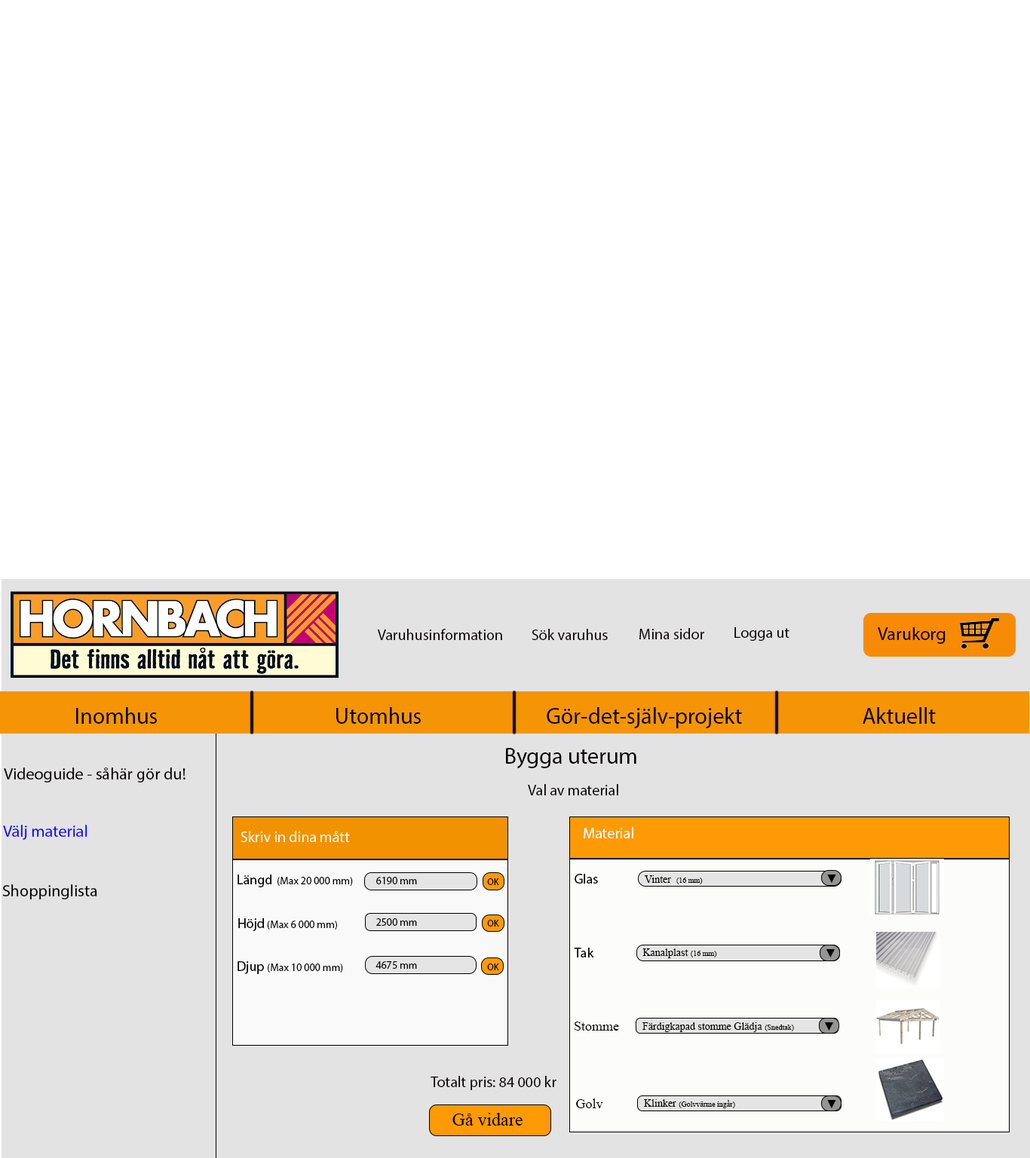
<style>
.page{position:relative;width:1030px;height:1158px;background:#ffffff}
.page>*{position:absolute;margin:0}
.t1{font:15.1px "MyriadPro-Regular";color:#060000}
.t2{font:18.1px "MyriadPro-Regular";color:#060000}
.t3{font:22.6px "MyriadPro-Regular";color:#0b0700}
.t4{font:22.6px "MyriadPro-Regular";color:#060000}
.t5{font:16.6px "MyriadPro-Regular";color:#060000}
.t6{font:16.6px "MyriadPro-Regular";color:#0f04f8}
.t7{font:15.1px "MyriadPro-Regular";color:#faf9f9}
.t8{font:15.1px "MyriadPro-Regular";color:#fcfcfb}
.t9{font:10.6px "MyriadPro-Regular";color:#020100}
.t10{font:13.6px "MyriadPro-Regular";color:#020100}
.t11{font:10.6px "MyriadPro-Regular";color:#040200}
.t12{font:9px "MyriadPro-Regular";color:#040200}
.t13{font:13.6px "MyriadPro-Regular";color:#040200}
.t14{font:7.5px "TimesNewRomanPSMT";color:#020100}
.t15{font:10.6px "TimesNewRomanPSMT";color:#020100}
.t16{font:12.1px "TimesNewRomanPSMT";color:#040200}
.t17{font:16.6px "MyriadPro-Regular";color:#000004}
.t18{font:13.6px "TimesNewRomanPSMT";color:#040200}
.t19{font:12.1px "TimesNewRomanPSMT";color:#020100}
.t20{font:18.1px "TimesNewRomanPSMT";color:#040200}
</style>
<div class="page">
<p class="t1" style="left:377px;top:629px;width:125px;height:11px">Varuhusinformation</p>
<p class="t1" style="left:531px;top:629px;width:77px;height:11px">Sök varuhus</p>
<p class="t1" style="left:639px;top:628px;width:65px;height:11px">Mina sidor</p>
<p class="t1" style="left:734px;top:627px;width:55px;height:14px">Logga ut</p>
<p class="t2" style="left:878px;top:627px;width:67px;height:17px">Varukorg</p>
<p class="t3" style="left:76px;top:707px;width:81px;height:17px">Inomhus</p>
<p class="t3" style="left:336px;top:707px;width:85px;height:17px">Utomhus</p>
<p class="t3" style="left:547px;top:707px;width:195px;height:21px">Gör-det-själv-projekt</p>
<p class="t3" style="left:862px;top:707px;width:74px;height:17px">Aktuellt</p>
<p class="t4" style="left:506px;top:748px;width:130px;height:21px">Bygga uterum</p>
<p class="t5" style="left:4px;top:767px;width:181px;height:16px">Videoguide - såhär gör du!</p>
<p class="t1" style="left:528px;top:784px;width:90px;height:11px">Val av material</p>
<p class="t6" style="left:3px;top:825px;width:84px;height:15px">Välj material</p>
<p class="t7" style="left:240px;top:831px;width:110px;height:11px">Skriv in dina mått</p>
<p class="t8" style="left:583px;top:827px;width:50px;height:11px">Material</p>
<p class="t9" style="left:237px;top:874px;width:116px;height:13px"><span class="t10">Längd</span>  (Max 20 000 mm)</p>
<p class="t11" style="left:376px;top:877px;width:41px;height:7px">6190 mm</p>
<p class="t12" style="left:487px;top:878px;width:12px;height:7px">OK</p>
<p class="t13" style="left:574px;top:874px;width:24px;height:10px">Glas</p>
<p class="t14" style="left:645px;top:875px;width:58px;height:9px"><span class="t15">Vinter  </span>(16 mm)</p>
<p class="t16" style="left:827px;top:874px;width:9px;height:9px">▼</p>
<p class="t17" style="left:2px;top:884px;width:95px;height:15px">Shoppinglista</p>
<p class="t9" style="left:238px;top:918px;width:99px;height:13px"><span class="t10">Höjd</span> (Max 6 000 mm)</p>
<p class="t11" style="left:376px;top:918px;width:41px;height:8px">2500 mm</p>
<p class="t12" style="left:487px;top:920px;width:12px;height:7px">OK</p>
<p class="t10" style="left:574px;top:948px;width:20px;height:9px">Tak</p>
<p class="t15" style="left:642px;top:948px;width:75px;height:10px">Kanalplast <span class="t14">(16 mm)</span></p>
<p class="t16" style="left:825px;top:949px;width:10px;height:8px">▼</p>
<p class="t9" style="left:237px;top:961px;width:106px;height:13px"><span class="t10">Djup </span>(Max 10 000 mm)</p>
<p class="t11" style="left:375px;top:961px;width:42px;height:8px">4675 mm</p>
<p class="t12" style="left:487px;top:963px;width:12px;height:7px">OK</p>
<p class="t18" style="left:574px;top:1021px;width:45px;height:10px">Stomme</p>
<p class="t15" style="left:642px;top:1022px;width:152px;height:10px">Färdigkapad stomme Glädja <span class="t14">(Snedtak)</span></p>
<p class="t16" style="left:824px;top:1022px;width:9px;height:9px">▼</p>
<p class="t1" style="left:430px;top:1076px;width:126px;height:14px">Totalt pris: 84 000 kr</p>
<p class="t18" style="left:576px;top:1098px;width:27px;height:10px">Golv</p>
<p class="t14" style="left:644px;top:1099px;width:91px;height:9px"><span class="t15">Klinker </span>(Golvvärme ingår)</p>
<p class="t19" style="left:827px;top:1100px;width:9px;height:8px">▼</p>
<p class="t20" style="left:452px;top:1113px;width:70px;height:13px">Gå vidare</p>
</div>
